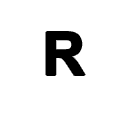
<style>
.page{position:relative;width:128px;height:128px;background:#ffffff}
.page>*{position:absolute;margin:0}
.t1{font:60px "Arial-BoldMT";letter-spacing:0.02em;color:#000000}
</style>
<div class="page">
<p class="t1" style="left:46px;top:32px;width:39px;height:43px">R</p>
</div>
